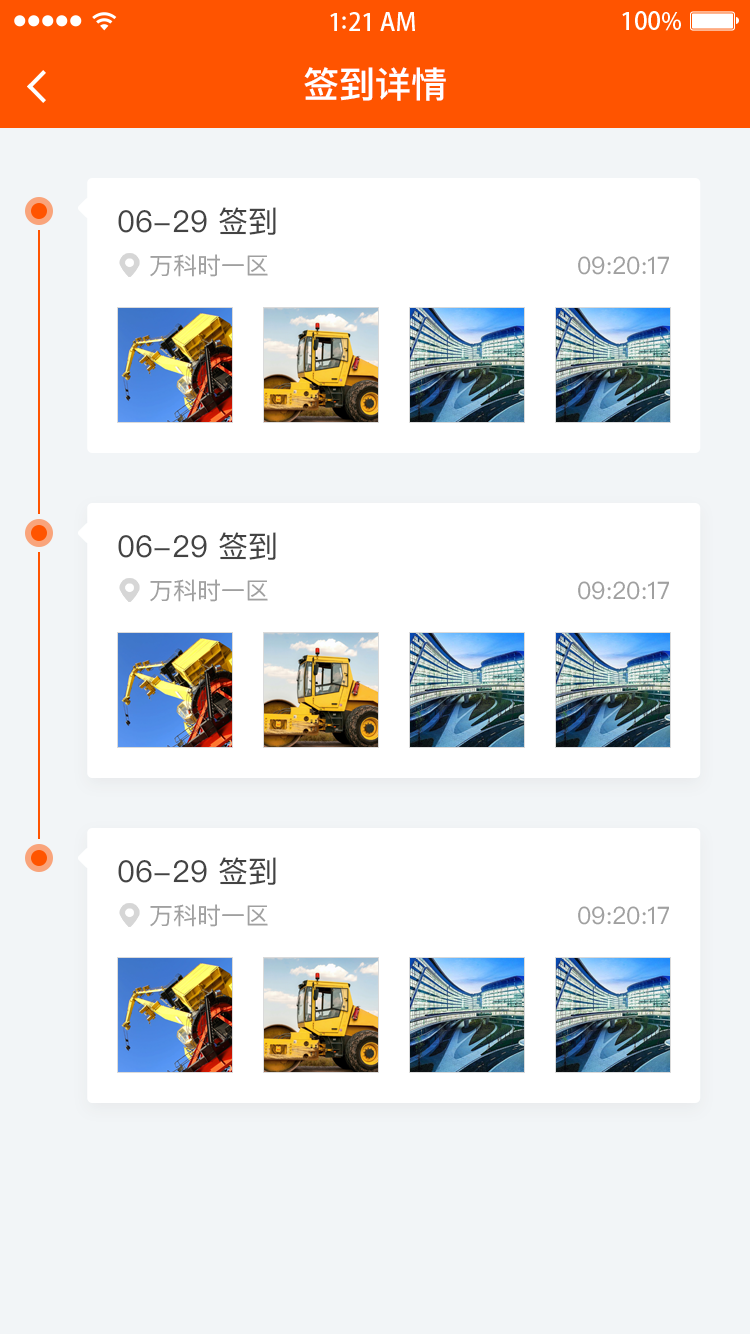
<style>
.page{position:relative;width:750px;height:1334px;background:#f2f5f7}
.page>*{position:absolute;margin:0}
.t1{font:36px "PingFangSC-Medium";color:#ffffff}
.t2{font:30px "PingFangSC-Regular";color:#434343}
.t3{font:24px "PingFangSC-Regular";color:#a0a0a0}
</style>
<div class="page">
<p class="t1" style="left:304px;top:67px;width:142px;height:34px">签到详情</p>
<p class="t2" style="left:118px;top:207px;width:158px;height:28px">06-29 签到</p>
<p class="t3" style="left:150px;top:254px;width:118px;height:23px">万科时一区</p>
<p class="t3" style="left:578px;top:256px;width:91px;height:19px">09:20:17</p>
<p class="t2" style="left:118px;top:532px;width:158px;height:28px">06-29 签到</p>
<p class="t3" style="left:150px;top:579px;width:118px;height:23px">万科时一区</p>
<p class="t3" style="left:578px;top:581px;width:91px;height:19px">09:20:17</p>
<p class="t2" style="left:118px;top:857px;width:158px;height:28px">06-29 签到</p>
<p class="t3" style="left:150px;top:904px;width:118px;height:23px">万科时一区</p>
<p class="t3" style="left:578px;top:906px;width:91px;height:19px">09:20:17</p>
</div>
